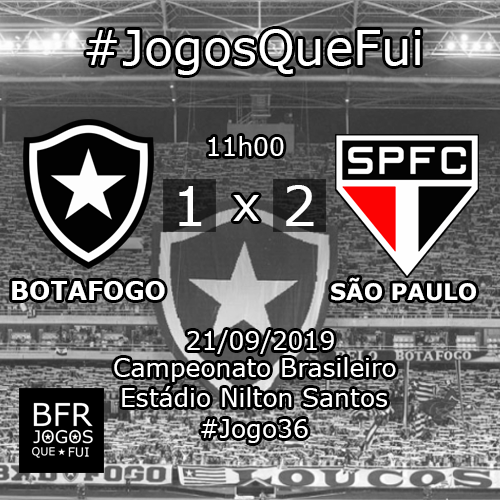
<style>
.page{position:relative;width:500px;height:500px}
.page>*{position:absolute;margin:0}
.t1{font:48px "Verdana";color:#ffffff}
.t2{font:25px "Verdana";color:#ffffff}
.t3{font:55px "Verdana";color:#ffffff}
.t4{font:25px "Verdana-Bold";color:#ffffff}
.t5{font:22.7px "Verdana-Bold";color:#ffffff}
</style>
<div class="page">
<p class="t1" style="left:86px;top:29px;width:335px;height:46px">#JogosQueFui</p>
<p class="t2" style="left:208px;top:136px;width:76px;height:20px">11h00</p>
<p class="t3" style="left:286px;top:185px;width:28px;height:41px">2</p>
<p class="t3" style="left:179px;top:186px;width:23px;height:40px">1</p>
<p class="t1" style="left:233px;top:195px;width:26px;height:26px">x</p>
<p class="t4" style="left:12px;top:281px;width:153px;height:19px">BOTAFOGO</p>
<p class="t5" style="left:331px;top:277px;width:145px;height:24px">SÃO PAULO</p>
<p class="t2" style="left:187px;top:330px;width:147px;height:24px">21/09/2019</p>
<p class="t2" style="left:114px;top:357px;width:282px;height:25px">Campeonato Brasileiro</p>
<p class="t2" style="left:122px;top:386px;width:265px;height:21px">Estádio Nilton Santos</p>
<p class="t2" style="left:201px;top:419px;width:107px;height:24px">#Jogo36</p>
</div>
